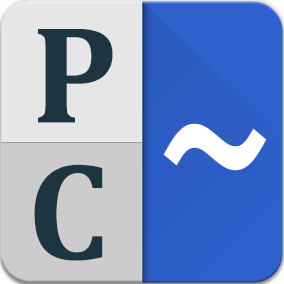
<style>
.page{position:relative;width:284px;height:284px}
.page>*{position:absolute;margin:0}
.t1{font:140px "Cambria-Bold";color:#1c3541}
.t2{font:228px "Cambria-Bold";color:#ffffff;scale:0.83 1}
</style>
<div class="page">
<p class="t1" style="left:38px;top:29px;width:75px;height:94px">P</p>
<p class="t2" style="left:163px;top:123px;width:103px;height:48px">~</p>
<p class="t1" style="left:34px;top:164px;width:69px;height:97px">C</p>
</div>
